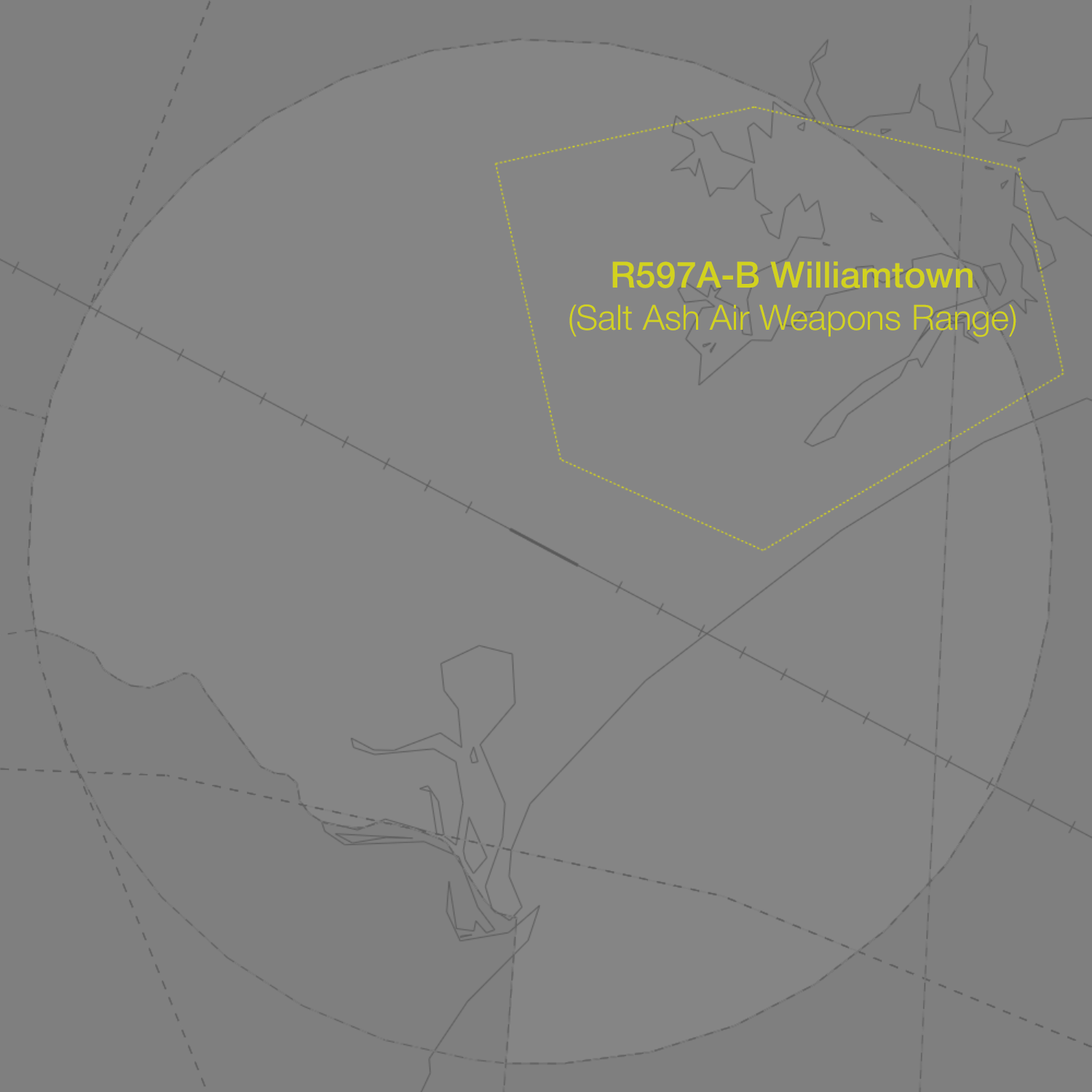
<style>
.page{position:relative;width:1092px;height:1092px;background:#858585}
.page>*{position:absolute;margin:0}
.t1{font:34.9px "HelveticaNeue-Light";color:#d2d21e}
.t2{font:36.4px "HelveticaNeue-Medium";color:#d2d21e}
</style>
<div class="page">
<p class="t1" style="left:569px;top:261px;width:447px;height:76px;text-align:center"><span class="t2">R597A-B Williamtown<br></span>(Salt Ash Air Weapons Range)</p>
</div>
